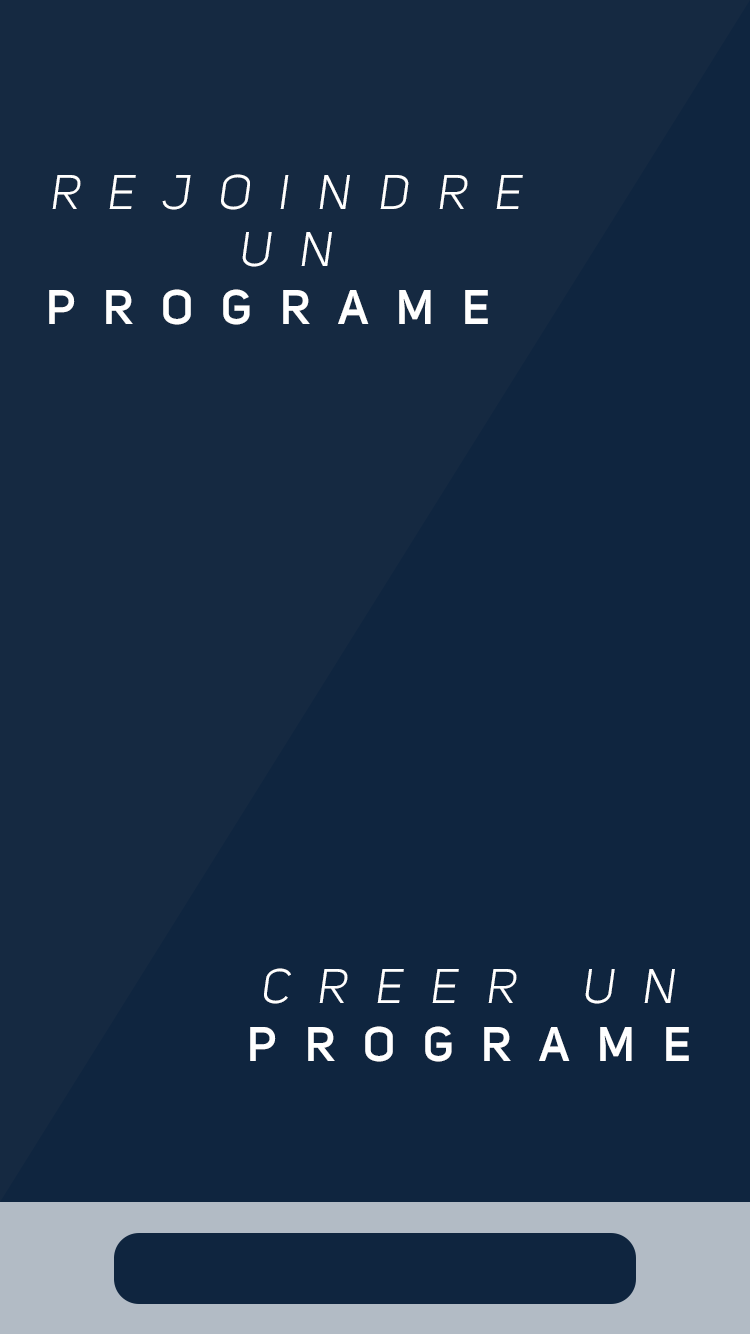
<style>
.page{position:relative;width:750px;height:1334px;background:#0f253f}
.page>*{position:absolute;margin:0}
.t1{font:48px "UniSansBookItalic";letter-spacing:0.585em;color:#ffffff;text-transform:uppercase}
.t2{font:48px "UniSansSemiBold";letter-spacing:0.585em;color:#ffffff;text-transform:uppercase}
</style>
<div class="page">
<p class="t1" style="left:49px;top:174px;width:474px;height:151px;text-align:center">rejoindre<br>un<br><span class="t2">programe</span></p>
<p class="t1" style="left:250px;top:968px;width:439px;height:94px;text-align:center">CREER UN<br><span class="t2">PROGRAME</span></p>
</div>
